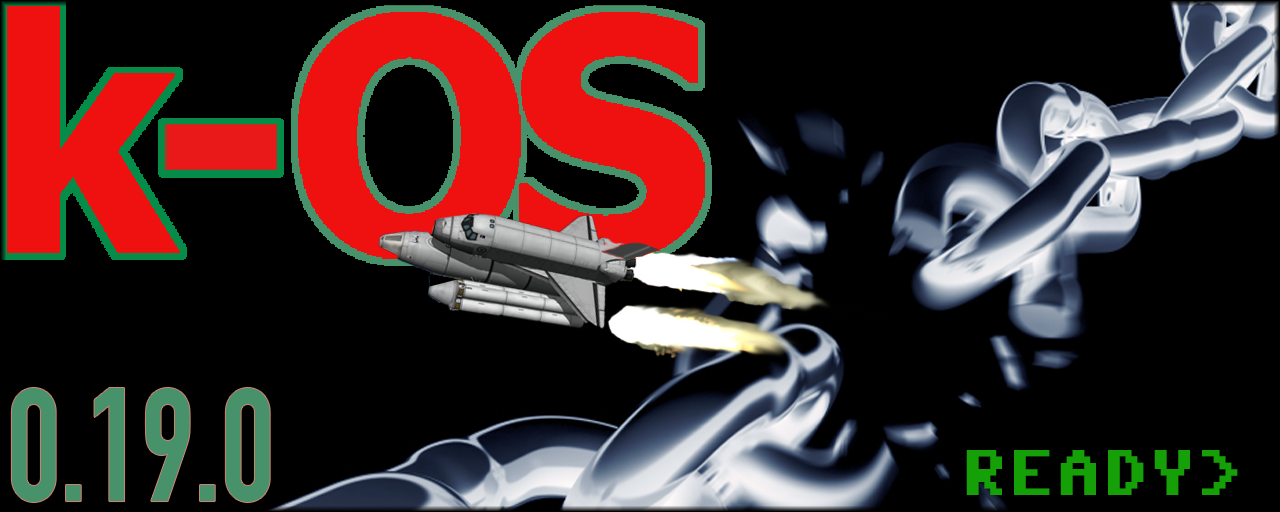
<style>
.page{position:relative;width:1280px;height:512px;background:#000000}
.page>*{position:absolute;margin:0}
.t1{font:158.4px "DINCondensed-Bold";color:#47916b;scale:0.91 1}
.t2{font:66px "Commodore64";color:#16a008;scale:0.91 1}
</style>
<div class="page">
<p class="t1" style="left:11px;top:388px;width:259px;height:114px">0.19.0</p>
<p class="t2" style="left:966px;top:450px;width:272px;height:45px">READY&gt;</p>
</div>
